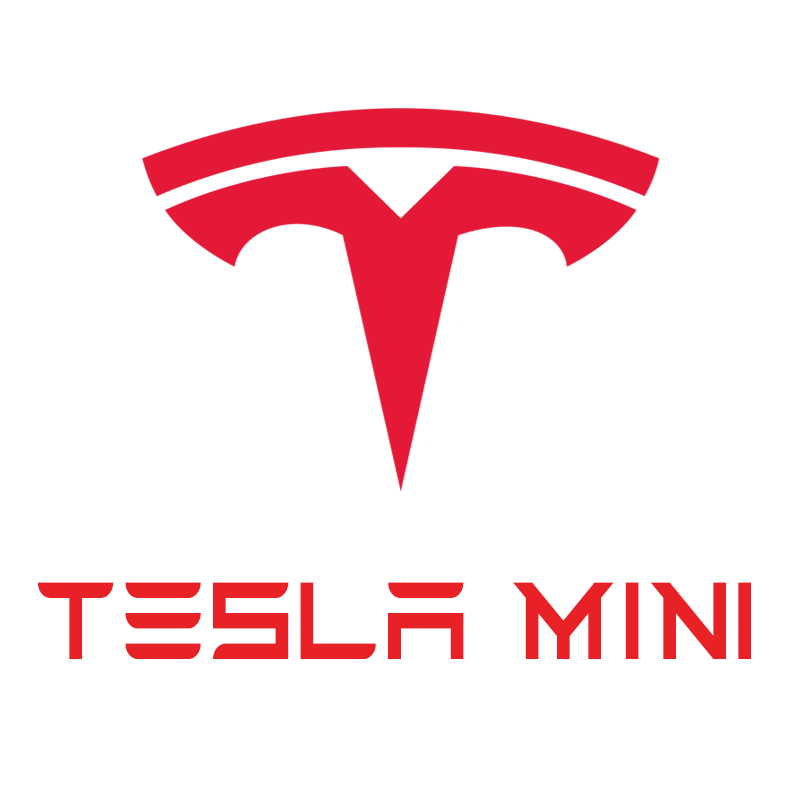
<style>
.page{position:relative;width:800px;height:800px;background:#ffffff}
.page>*{position:absolute;margin:0}
.t1{font:122.3px "TESLA";color:#e82127;scale:0.82 1}
</style>
<div class="page">
<p class="t1" style="left:37px;top:582px;width:714px;height:77px">TESLA MINI</p>
</div>
